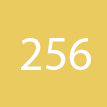
<style>
.page{position:relative;width:107px;height:107px;background:#eacb5f}
.page>*{position:absolute;margin:0}
.t1{font:48px "MyriadPro-Regular";color:#ffffff}
</style>
<div class="page">
<p class="t1" style="left:21px;top:38px;width:70px;height:32px">256</p>
</div>
